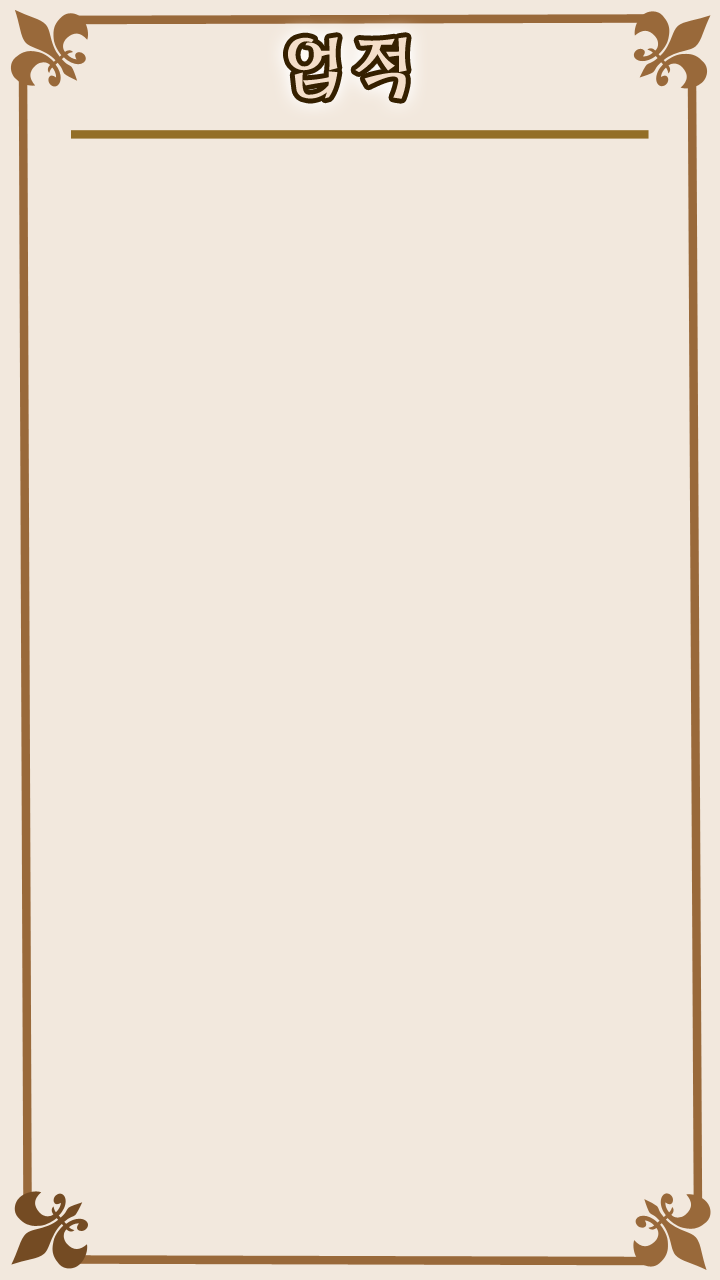
<style>
.page{position:relative;width:720px;height:1280px;background:#f2e8dd}
.page>*{position:absolute;margin:0}
.t1{font:70px "TSTNamr";letter-spacing:0.1em;color:#f4dec9}
</style>
<div class="page">
<p class="t1" style="left:288px;top:37px;width:119px;height:62px">업적</p>
</div>
